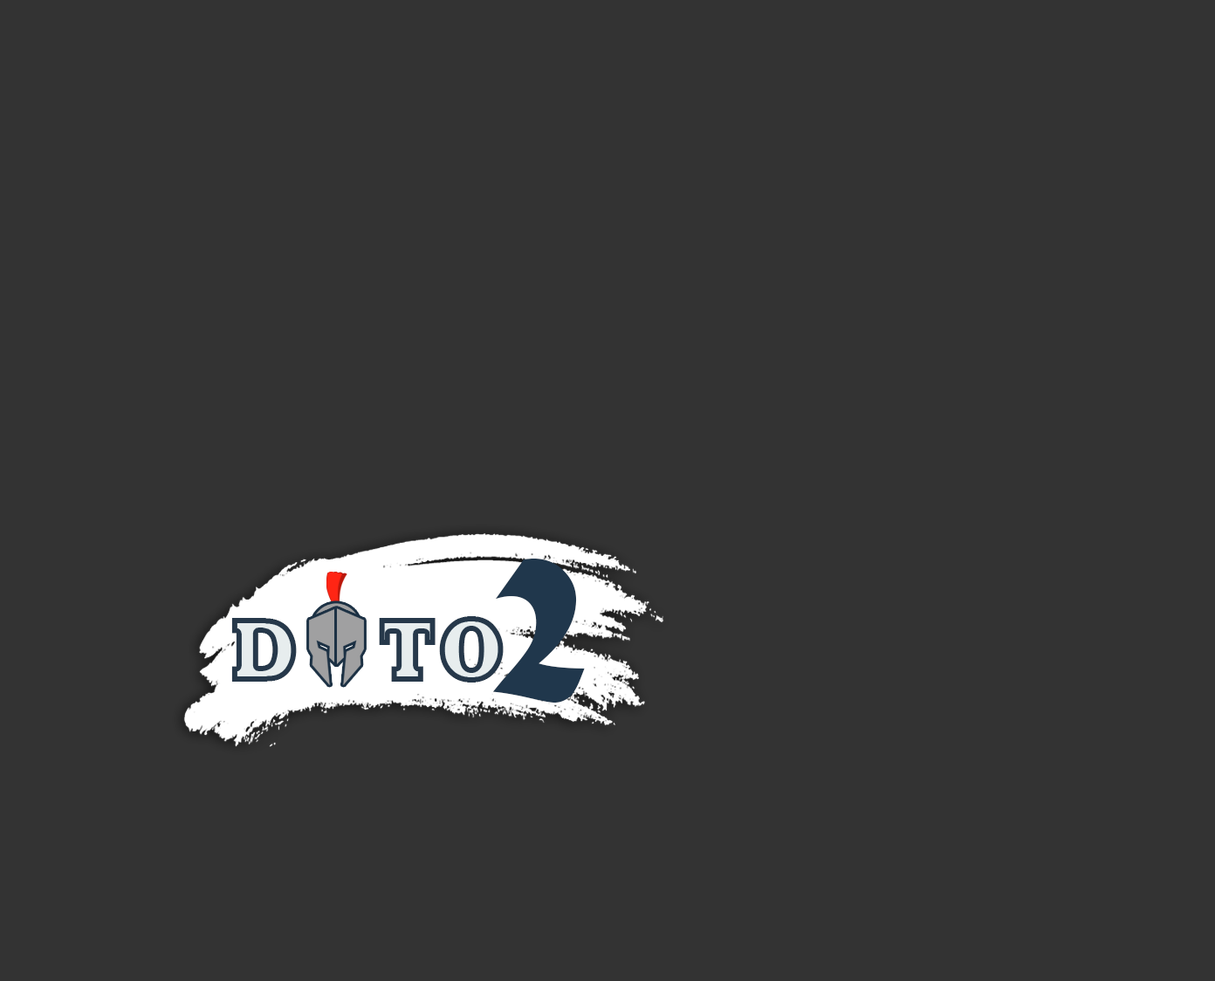
<style>
.page{position:relative;width:1215px;height:981px;background:#333333}
.page>*{position:absolute;margin:0}
.t1{font:230.7px "MaturaMTScriptCapitals";color:#20374c;scale:0.93 1}
.t2{font:94.4px "Rockwell-ExtraBold";scale:0.87 1}
</style>
<div class="page">
<p class="t1" style="left:492px;top:559px;width:93px;height:144px">2</p>
<p class="t2" style="left:231px;top:616px;width:273px;height:67px">D    TO</p>
</div>
